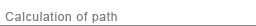
<style>
.page{position:relative;width:256px;height:26px;background:#ffffff}
.page>*{position:absolute;margin:0}
.t1{font:12.4px "ArialMT";letter-spacing:0.05em;color:#7f7f7f}
</style>
<div class="page">
<p class="t1" style="left:5px;top:12px;width:112px;height:11px">Calculation of path</p>
</div>
